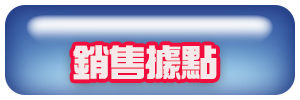
<style>
.page{position:relative;width:300px;height:100px}
.page>*{position:absolute;margin:0}
.t1{font:36px "¥þ¯uºîÃÀÅé";color:#f5eaea}
</style>
<div class="page">
<p class="t1" style="left:73px;top:45px;width:144px;height:35px">銷售據點</p>
</div>
